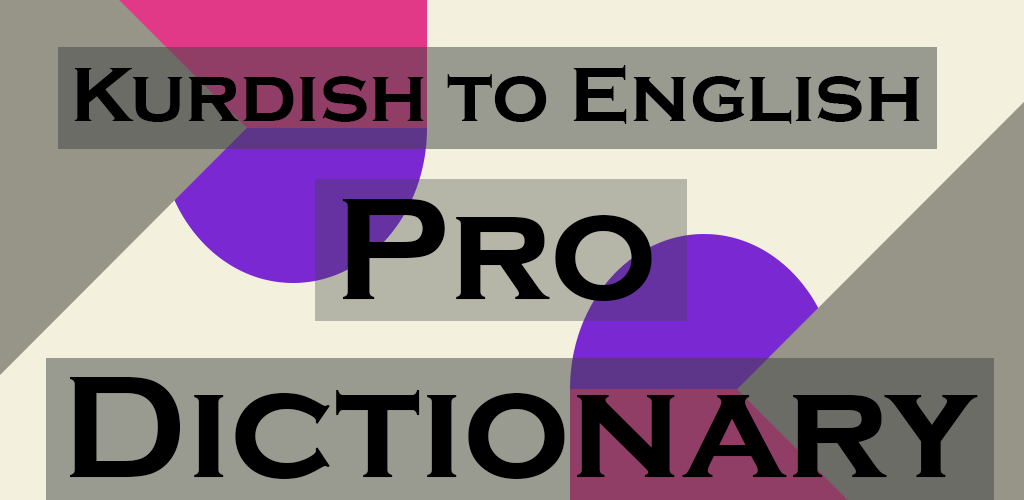
<style>
.page{position:relative;width:1024px;height:500px;background:#f3f1dd}
.page>*{position:absolute;margin:0}
.t1{font:80px "CopperplateGothic-Bold";color:#000000}
.t2{font:150px "CopperplateGothic-Bold";color:#000000}
</style>
<div class="page">
<p class="t1" style="left:74px;top:65px;width:846px;height:59px">Kurdish to English</p>
<p class="t2" style="left:343px;top:199px;width:309px;height:102px">Pro</p>
<p class="t2" style="left:70px;top:377px;width:908px;height:102px">Dictionary</p>
</div>
